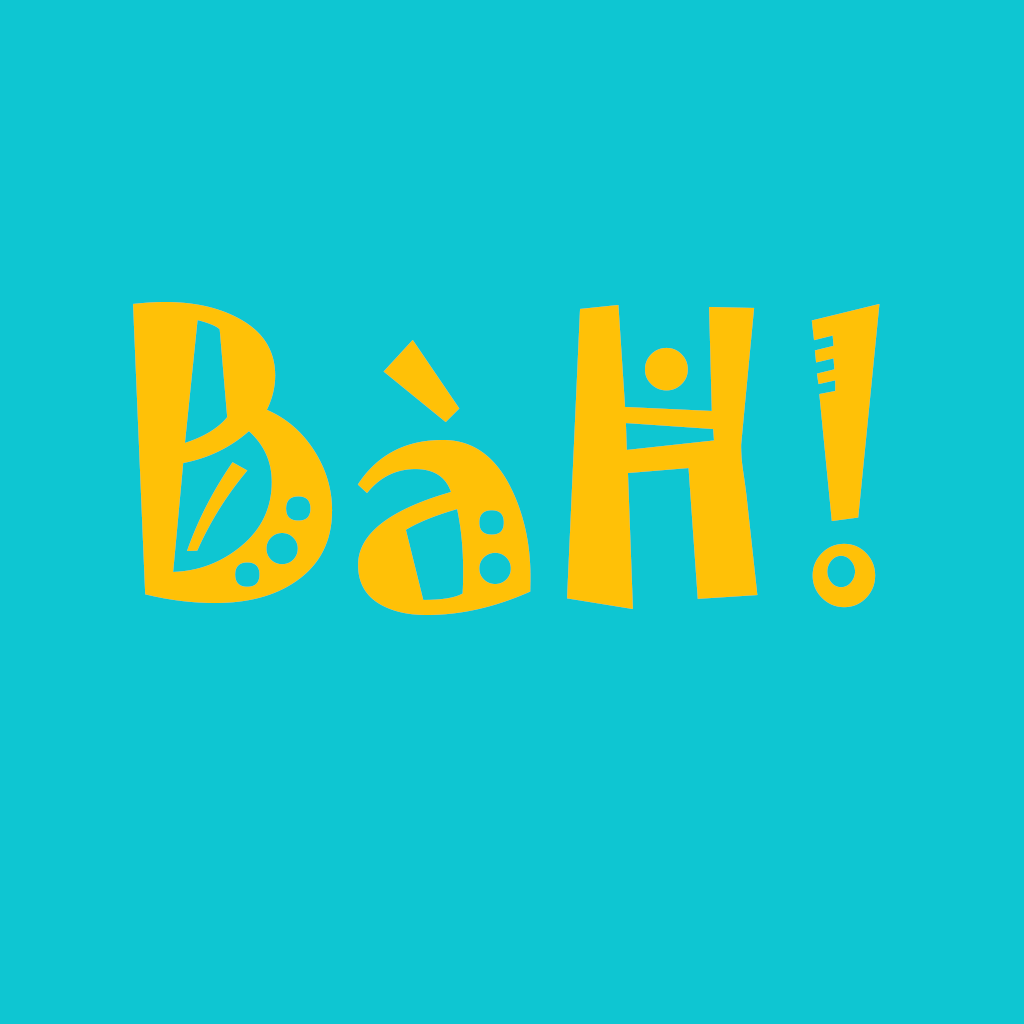
<style>
.page{position:relative;width:1024px;height:1024px;background:#0ec6d2}
.page>*{position:absolute;margin:0}
.t1{font:350px "Jokerman-Regular";color:#ffc107}
</style>
<div class="page">
<p class="t1" style="left:133px;top:302px;width:747px;height:313px">BàH!!</p>
</div>
